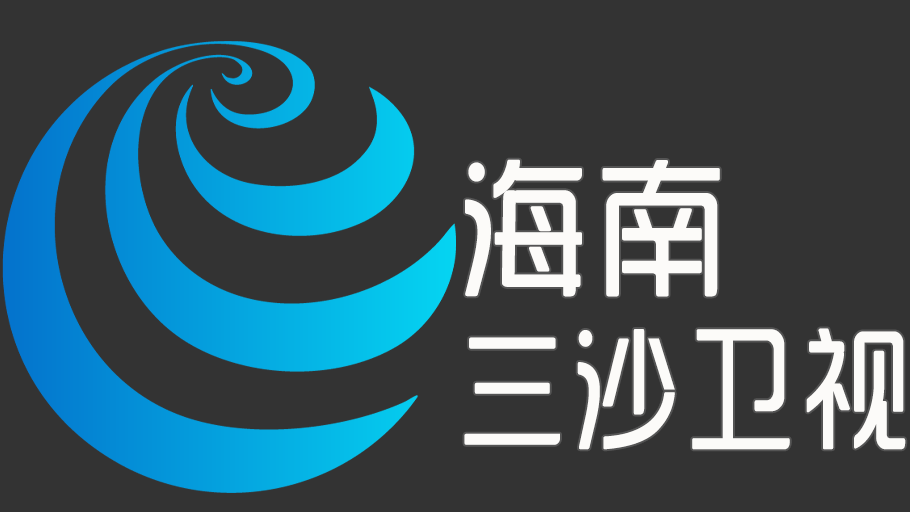
<style>
.page{position:relative;width:910px;height:512px;background:#333333}
.page>*{position:absolute;margin:0}
.t1{font:132px/170px "SJyunlvyuan";letter-spacing:0.02em;color:#fcfbf9;scale:0.85 1}
.t2{font:150px/170px "SJyunlvyuan";letter-spacing:0.02em;color:#fcfbf9;scale:0.9 1}
</style>
<div class="page">
<p class="t1" style="left:464px;top:159px;width:442px;height:291px"><span class="t2">海南<br></span>三沙卫视</p>
</div>
